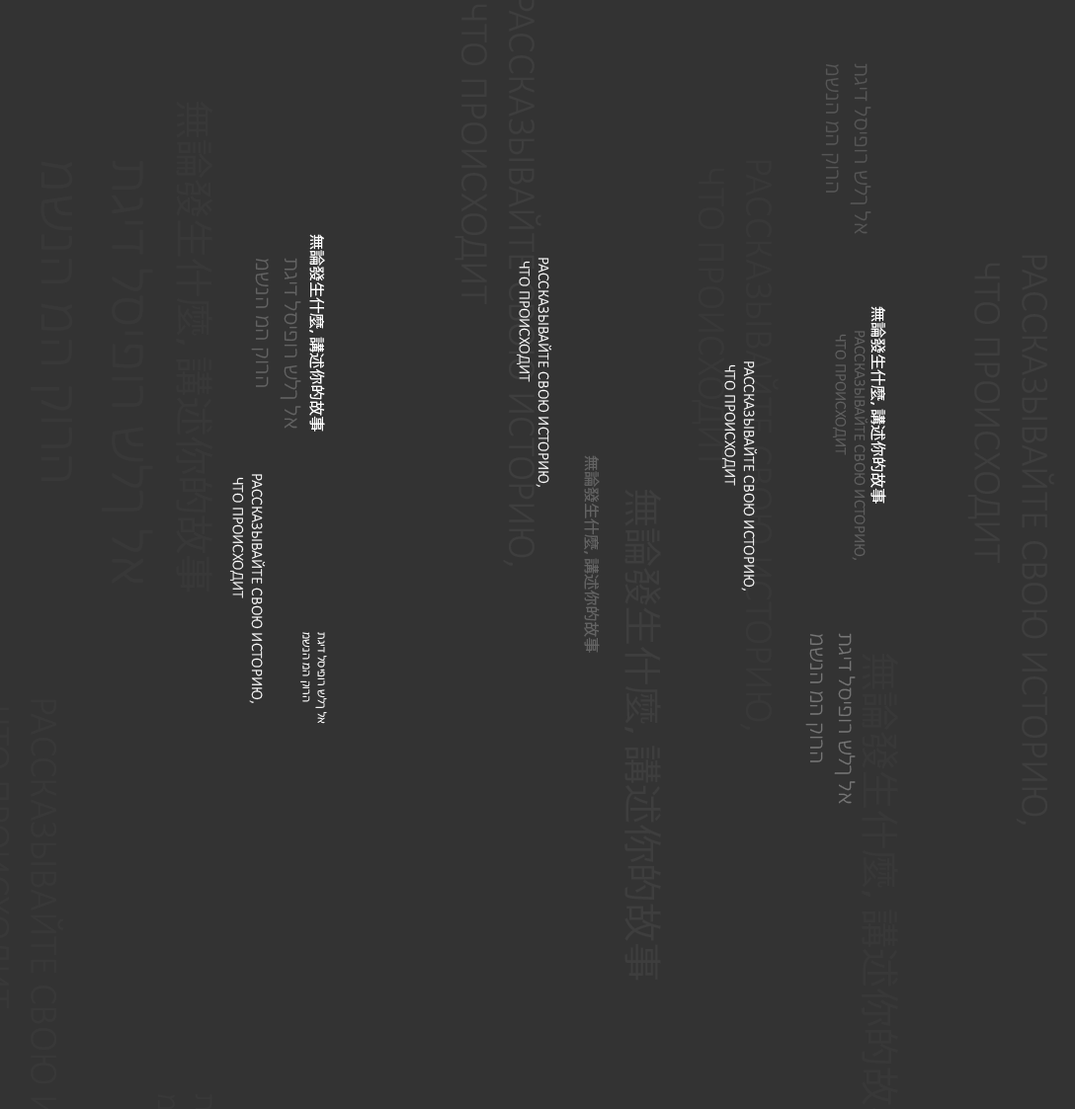
<style>
.page{position:relative;width:1075px;height:1109px;background:#333333}
.page>*{position:absolute;margin:0}
.t1{font:23.7px "Calibri-Light";color:#565656}
.t2{font:15.4px "KozGoPr6N-Regular";color:#ffffff}
.t3{font:23.7px "Calibri-Light";color:#636363}
.t4{font:15.8px "Calibri-Light";color:#ffffff}
.t5{font:15.8px "Calibri-Light";color:#636363}
.t6{font:15.4px "KozGoPr6N-Regular";color:#636363}
.t7{font:12.5px "Calibri-Light";color:#ffffff}
.t8{font:23.7px "Calibri-Light";color:#757575}
</style>
<div class="page">
<p class="t1" style="left:821px;top:63px;width:50px;height:171px;rotate:90deg">תגיד לסיפור שלך לא <br>משנה מה קורה</p>
<p class="t2" style="left:309px;top:234px;width:16px;height:198px;rotate:90deg">無論發生什麼，講述你的故事</p>
<p class="t3" style="left:251px;top:258px;width:50px;height:171px;rotate:90deg">תגיד לסיפור שלך לא <br>משנה מה קורה</p>
<p class="t4" style="left:516px;top:258px;width:36px;height:229px;rotate:90deg">РАССКАЗЫВАЙТЕ СВОЮ ИСТОРИЮ,<br> ЧТО ПРОИСХОДИТ</p>
<p class="t2" style="left:870px;top:306px;width:16px;height:198px;rotate:90deg">無論發生什麼，講述你的故事</p>
<p class="t5" style="left:832px;top:331px;width:36px;height:229px;rotate:90deg">РАССКАЗЫВАЙТЕ СВОЮ ИСТОРИЮ,<br> ЧТО ПРОИСХОДИТ</p>
<p class="t4" style="left:721px;top:362px;width:37px;height:229px;rotate:90deg">РАССКАЗЫВАЙТЕ СВОЮ ИСТОРИЮ,<br> ЧТО ПРОИСХОДИТ</p>
<p class="t6" style="left:584px;top:455px;width:16px;height:198px;rotate:90deg">無論發生什麼，講述你的故事</p>
<p class="t4" style="left:229px;top:474px;width:37px;height:229px;rotate:90deg">РАССКАЗЫВАЙТЕ СВОЮ ИСТОРИЮ,<br> ЧТО ПРОИСХОДИТ</p>
<p class="t7" style="left:300px;top:632px;width:27px;height:92px;rotate:90deg">תגיד לסיפור שלך לא <br>משנה מה קורה</p>
<p class="t8" style="left:805px;top:633px;width:51px;height:171px;rotate:90deg">תגיד לסיפור שלך לא <br>משנה מה קורה</p>
</div>
